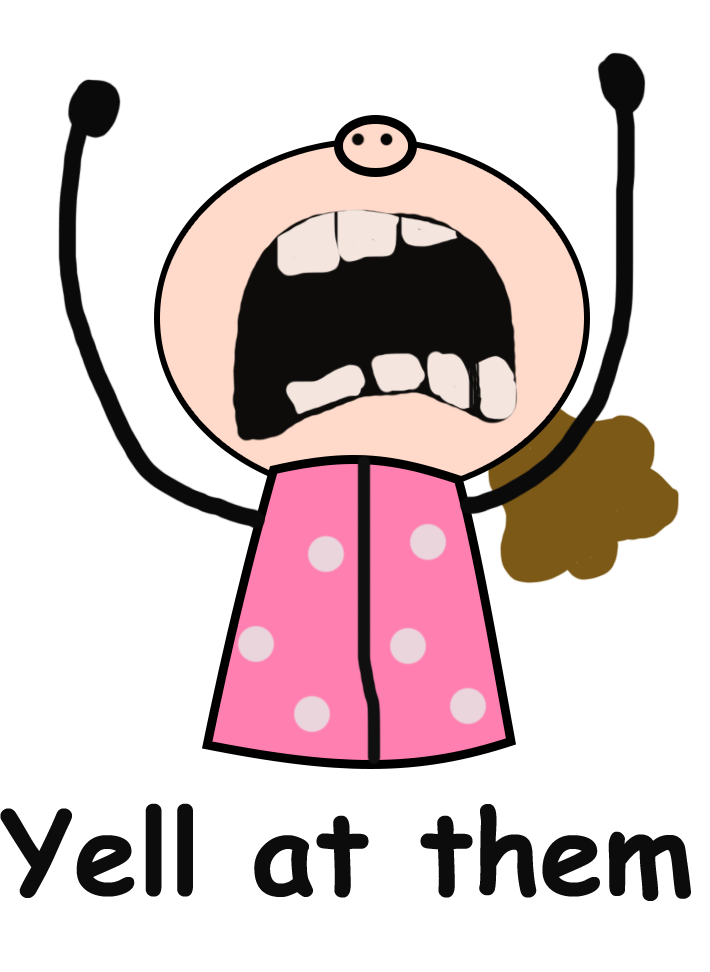
<style>
.page{position:relative;width:710px;height:972px;background:#ffffff}
.page>*{position:absolute;margin:0}
.t1{font:115px "ComicSansMS-Bold";color:#0c0c0c}
</style>
<div class="page">
<p class="t1" style="left:0px;top:803px;width:691px;height:98px">Yell at them</p>
</div>
